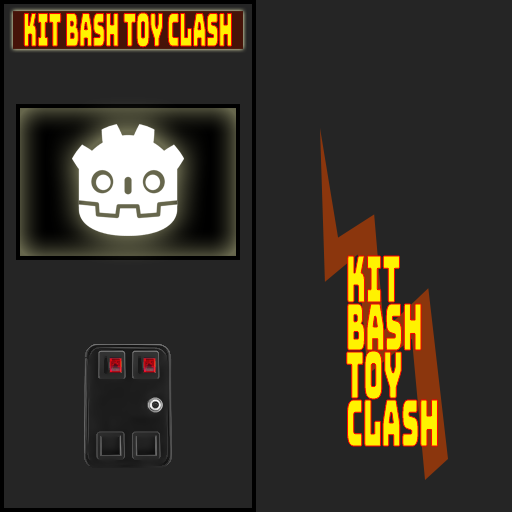
<style>
.page{position:relative;width:512px;height:512px;background:#252525}
.page>*{position:absolute;margin:0}
.t1{font:45px "Bungee-Regular";color:#fff200;scale:0.42 1}
.t2{font:64px/48px "Bungee-Regular";color:#fff200;scale:0.42 1}
</style>
<div class="page">
<p class="t1" style="left:24px;top:13px;width:208px;height:34px">KIT BASH TOY CLASH</p>
<p class="t2" style="left:346px;top:256px;width:92px;height:190px">KIT<br>BASH<br>TOY<br>CLASH</p>
</div>
